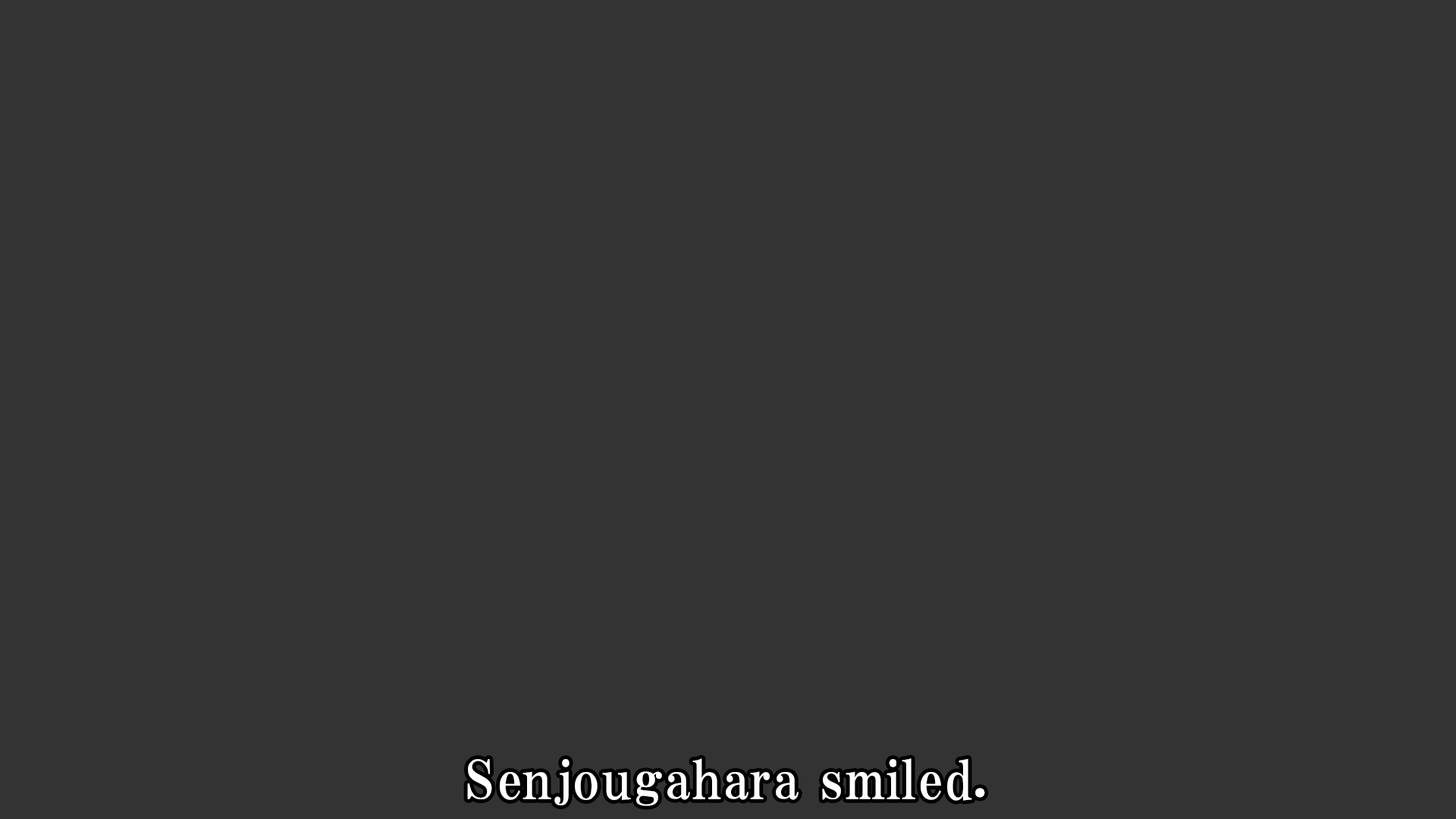
<style>
.page{position:relative;width:1456px;height:819px;background:#333333}
.page>*{position:absolute;margin:0}
.t1{font:53.1px "HGPMinchoE";letter-spacing:0.025em;color:#ffffff}
</style>
<div class="page">
<p class="t1" style="left:467px;top:758px;width:518px;height:48px">Senjougahara smiled.</p>
</div>
